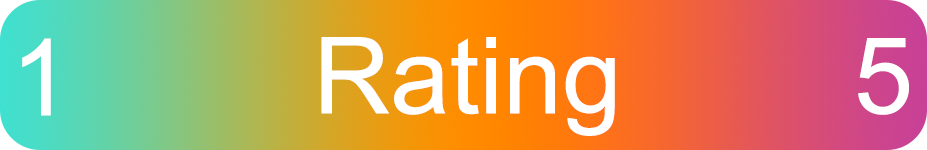
<style>
.page{position:relative;width:927px;height:150px}
.page>*{position:absolute;margin:0}
.t1{font:106.7px "ArialMT";color:#ffffff}
</style>
<div class="page">
<p class="t1" style="left:22px;top:38px;width:29px;height:78px">1</p>
<p class="t1" style="left:321px;top:37px;width:294px;height:99px">Rating</p>
<p class="t1" style="left:858px;top:38px;width:51px;height:77px">5</p>
</div>
